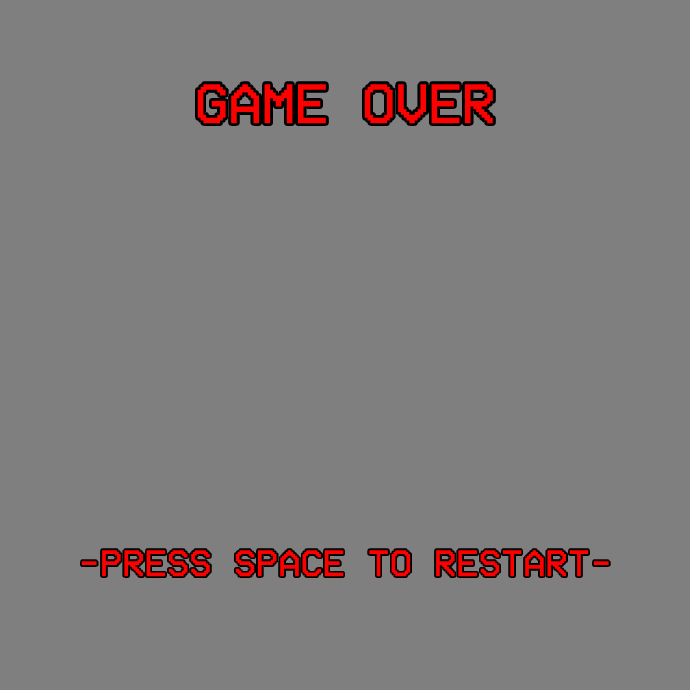
<style>
.page{position:relative;width:690px;height:690px;background:#7f7f7f}
.page>*{position:absolute;margin:0}
.t1{font:57px "VCROSDMono";color:#ff0000}
.t2{font:38px "VCROSDMono";color:#ff0000}
</style>
<div class="page">
<p class="t1" style="left:197px;top:84px;width:296px;height:40px">GAME OVER</p>
<p class="t2" style="left:81px;top:550px;width:528px;height:27px">-PRESS SPACE TO RESTART-</p>
</div>
